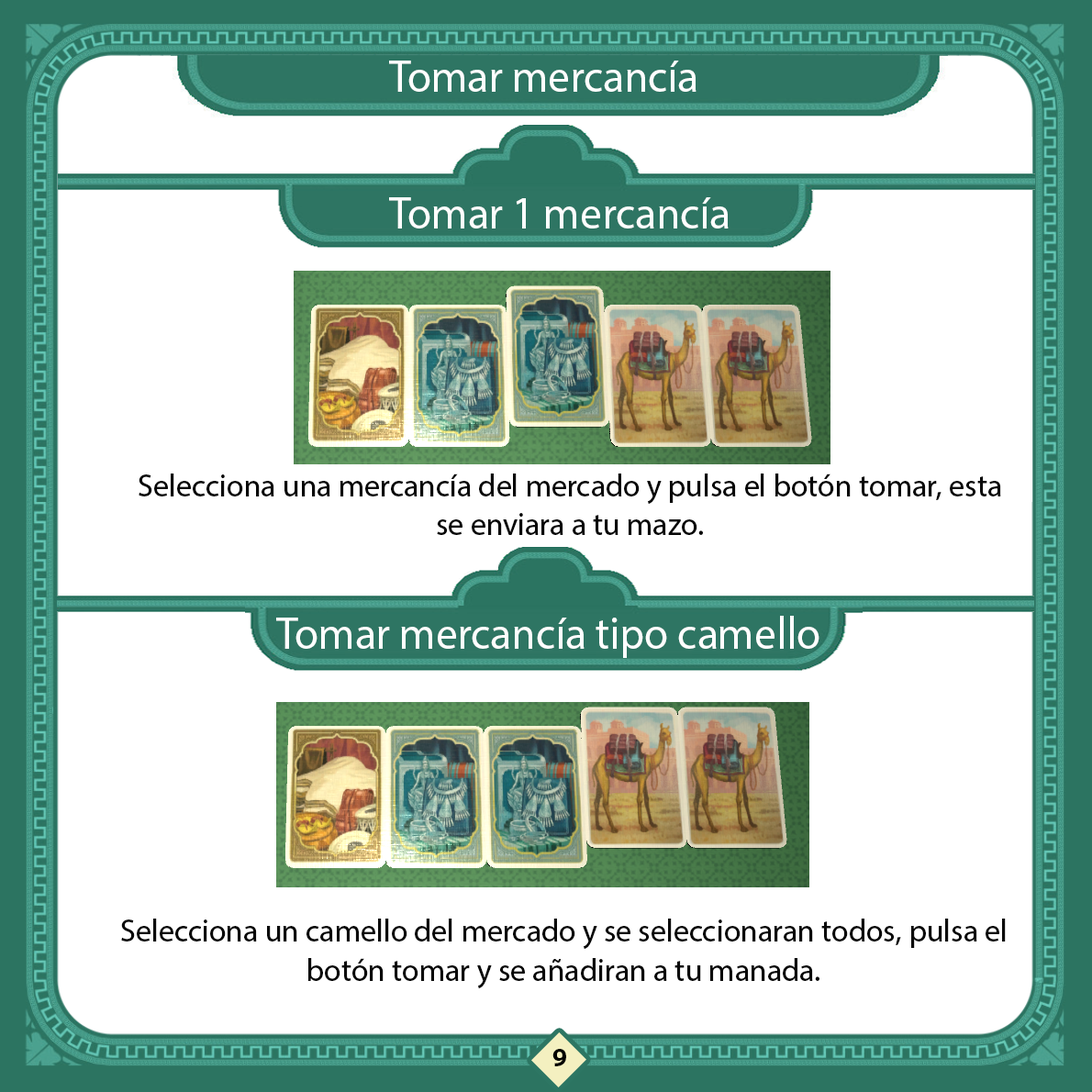
<style>
.page{position:relative;width:1092px;height:1092px;background:#ffffff}
.page>*{position:absolute;margin:0}
.t1{font:45.3px "MyriadHebrew-Regular";color:#ffffff;scale:0.96 1}
.t2{font:32.4px "MyriadHebrew-Regular";color:#070707;scale:0.96 1}
.t3{font:25.9px "MyriadHebrew-Bold";color:#000000}
</style>
<div class="page">
<p class="t1" style="left:389px;top:61px;width:307px;height:31px">Tomar mercancía</p>
<p class="t1" style="left:389px;top:197px;width:340px;height:31px">Tomar 1 mercancía</p>
<p class="t2" style="left:139px;top:473px;width:862px;height:62px;text-align:center">Selecciona una mercancía del mercado y pulsa el botón tomar, esta se enviara a tu mazo.</p>
<p class="t1" style="left:276px;top:616px;width:543px;height:42px">Tomar mercancía tipo camello</p>
<p class="t2" style="left:121px;top:919px;width:885px;height:69px;text-align:center">Selecciona un camello del mercado y se seleccionaran todos, pulsa el botón tomar y se añadiran a tu manada.</p>
<p class="t3" style="left:552px;top:1049px;width:14px;height:17px">9</p>
</div>
